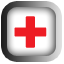
<style>
.page{position:relative;width:64px;height:64px;background:#ffffff}
.page>*{position:absolute;margin:0}
.t1{font:72px "Chick";color:#ed1c24}
</style>
<div class="page">
<p class="t1" style="left:14px;top:16px;width:33px;height:32px">+</p>
</div>
